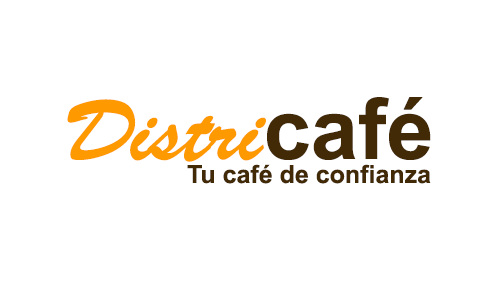
<style>
.page{position:relative;width:500px;height:300px;background:#ffffff}
.page>*{position:absolute;margin:0}
.t1{font:85px "BrushScriptStd";color:#ff9900}
.t2{font:85px "Arial-BoldMT";color:#422a06}
.t3{font:25px "Arial-BoldMT";color:#422a06}
</style>
<div class="page">
<p class="t1" style="left:67px;top:97px;width:364px;height:65px">Distri<span class="t2">café</span></p>
<p class="t3" style="left:187px;top:164px;width:244px;height:20px">Tu café de confianza</p>
</div>
